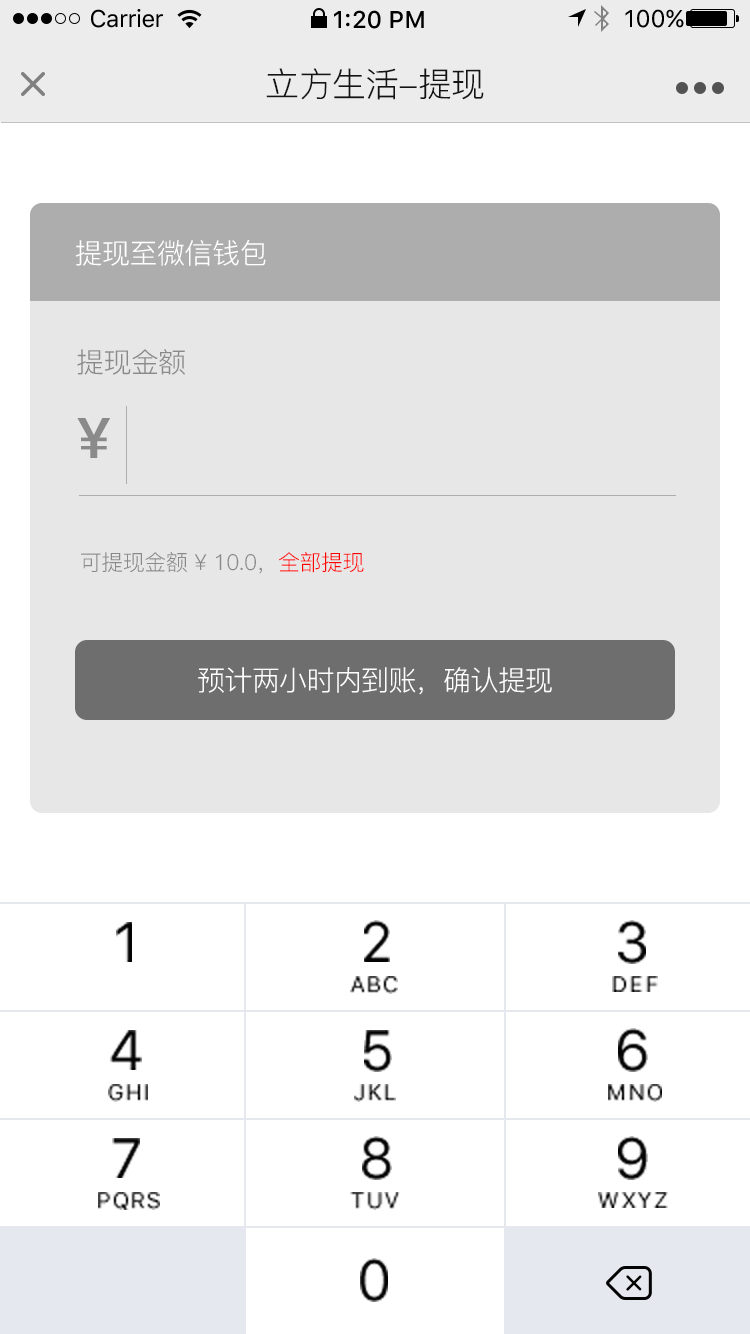
<style>
.page{position:relative;width:750px;height:1334px;background:#ffffff}
.page>*{position:absolute;margin:0}
.t1{font:24px "SFUIText-Regular";letter-spacing:-0.025em;color:#000000}
.t2{font:24px "SFUIText-Medium";color:#000000}
.t3{font:24px "SFUIText-Regular";color:#000000}
.t4{font:34px "PingFang-SC-Regular";letter-spacing:-0.02em;color:#141414}
.t5{font:28px "PingFang-SC-Regular";letter-spacing:-0.02em;color:#ffffff}
.t6{font:28px "PingFang-SC-Regular";letter-spacing:-0.024em;color:#8a8a8a}
.t7{font:56px "PingFang-SC-Heavy";letter-spacing:-0.024em;color:#8a8a8a}
.t8{font:22px "PingFang-SC-Regular";letter-spacing:-0.024em;color:#8a8a8a}
.t9{font:22px "PingFang-SC-Regular";letter-spacing:-0.024em;color:#ff0000}
.t10{font:28px "PingFang-SC-Regular";letter-spacing:-0.024em;color:#ffffff}
.t11{font:56px "SFUIText-Regular";color:#030303}
.t12{font:22px "SFUIText-Regular";letter-spacing:0.09em;color:#0e0e0e}
.t13{font:22px "SFUIText-Regular";letter-spacing:0.09em;color:#030303}
</style>
<div class="page">
<p class="t1" style="left:91px;top:9px;width:72px;height:19px">Carrier</p>
<p class="t2" style="left:334px;top:10px;width:90px;height:19px">1:20 PM</p>
<p class="t3" style="left:625px;top:9px;width:59px;height:19px">100%</p>
<p class="t4" style="left:266px;top:68px;width:218px;height:32px">立方生活-提现</p>
<p class="t5" style="left:75px;top:240px;width:191px;height:26px">提现至微信钱包</p>
<p class="t6" style="left:77px;top:349px;width:108px;height:26px">提现金额</p>
<p class="t7" style="left:77px;top:418px;width:34px;height:40px">¥</p>
<p class="t8" style="left:81px;top:552px;width:283px;height:22px">可提现金额 ¥ 10.0，<span class="t9">全部提现</span></p>
<p class="t10" style="left:198px;top:667px;width:354px;height:28px">预计两小时内到账，确认提现</p>
<p class="t11" style="left:116px;top:922px;width:16px;height:40px">1</p>
<p class="t11" style="left:364px;top:920px;width:26px;height:42px">2</p>
<p class="t11" style="left:618px;top:920px;width:28px;height:44px">3</p>
<p class="t12" style="left:350px;top:976px;width:48px;height:18px">ABC</p>
<p class="t13" style="left:612px;top:976px;width:46px;height:16px">DEF</p>
<p class="t11" style="left:110px;top:1030px;width:32px;height:40px">4</p>
<p class="t11" style="left:364px;top:1030px;width:28px;height:42px">5</p>
<p class="t11" style="left:618px;top:1028px;width:30px;height:44px">6</p>
<p class="t13" style="left:108px;top:1084px;width:40px;height:18px">GHI</p>
<p class="t13" style="left:354px;top:1084px;width:42px;height:18px">JKL</p>
<p class="t13" style="left:608px;top:1084px;width:54px;height:18px">MNO</p>
<p class="t11" style="left:112px;top:1138px;width:28px;height:40px">7</p>
<p class="t11" style="left:362px;top:1136px;width:30px;height:44px">8</p>
<p class="t11" style="left:618px;top:1136px;width:30px;height:44px">9</p>
<p class="t13" style="left:98px;top:1192px;width:62px;height:18px">PQRS</p>
<p class="t13" style="left:350px;top:1192px;width:50px;height:18px">TUV</p>
<p class="t13" style="left:598px;top:1192px;width:70px;height:16px">WXYZ</p>
<p class="t11" style="left:360px;top:1258px;width:28px;height:44px">0</p>
</div>
